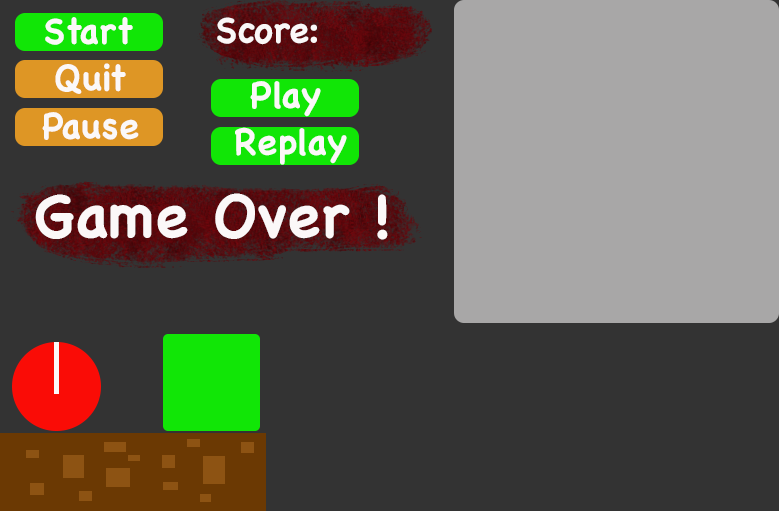
<style>
.page{position:relative;width:779px;height:511px;background:#333333}
.page>*{position:absolute;margin:0}
.t1{font:36px "ChalkboardSE-Bold";color:#fbf8f8}
.t2{font:60px "ChalkboardSE-Bold";color:#fbf8f8}
</style>
<div class="page">
<p class="t1" style="left:45px;top:17px;width:88px;height:28px">Start</p>
<p class="t1" style="left:217px;top:17px;width:100px;height:28px">Score:</p>
<p class="t1" style="left:55px;top:63px;width:71px;height:31px">Quit</p>
<p class="t1" style="left:250px;top:81px;width:71px;height:36px">Play</p>
<p class="t1" style="left:42px;top:112px;width:97px;height:28px">Pause</p>
<p class="t1" style="left:235px;top:127px;width:112px;height:38px">Replay</p>
<p class="t2" style="left:35px;top:193px;width:353px;height:47px">Game Over !</p>
</div>
